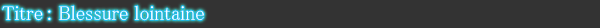
<style>
.page{position:relative;width:600px;height:28px;background:#333333}
.page>*{position:absolute;margin:0}
.t1{font:20px "MS-PMincho";color:#ffffff}
</style>
<div class="page">
<p class="t1" style="left:2px;top:5px;width:202px;height:16px">Titre : Blessure lointaine</p>
</div>
